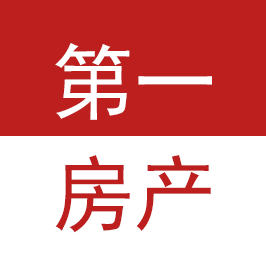
<style>
.page{position:relative;width:266px;height:266px;background:#bd1e1e}
.page>*{position:absolute;margin:0}
.t1{font:82.5px "SimHei";color:#ffffff}
.t2{font:82.5px "SimHei";color:#bd1e1e}
</style>
<div class="page">
<p class="t1" style="left:55px;top:43px;width:157px;height:77px">第一</p>
<p class="t2" style="left:55px;top:155px;width:156px;height:78px">房产</p>
</div>
